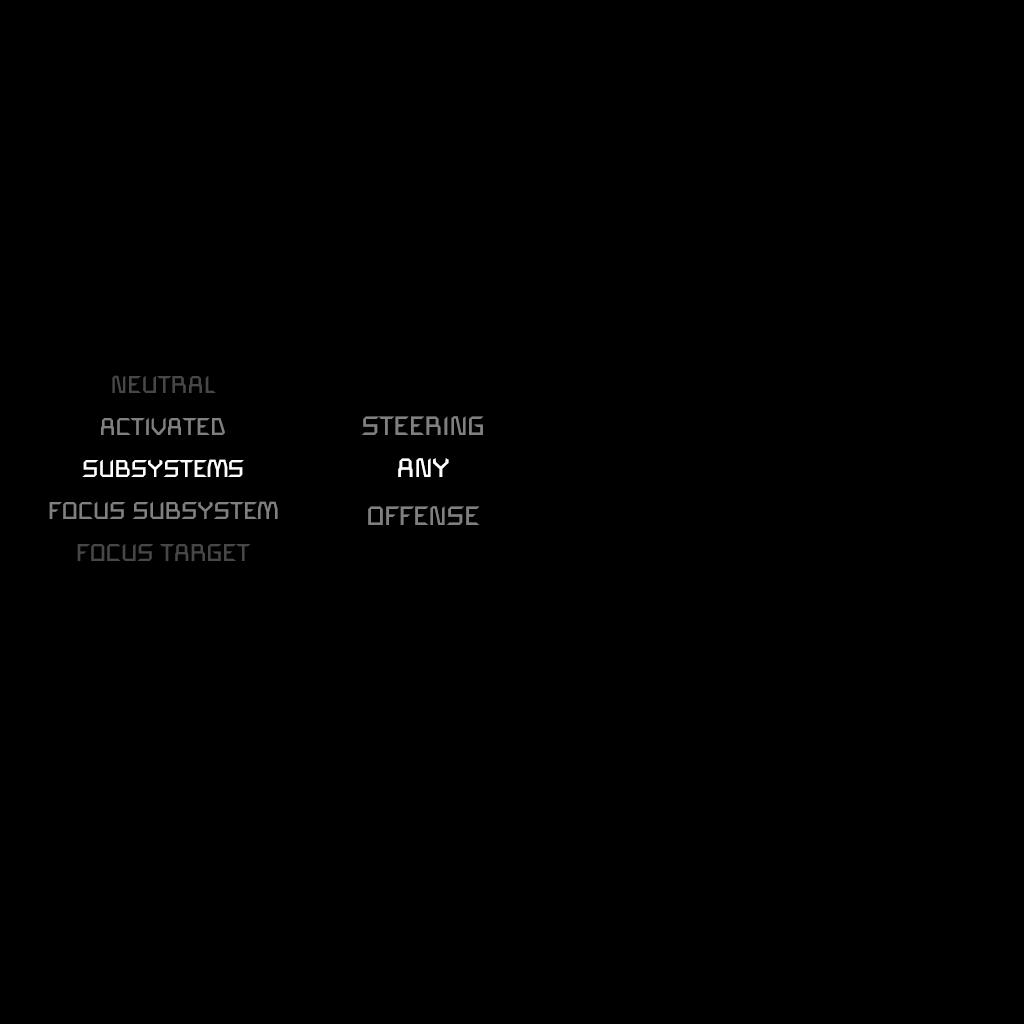
<style>
.page{position:relative;width:1024px;height:1024px;background:#000000}
.page>*{position:absolute;margin:0}
.t1{font:24px "SpaceEngineers";color:#474747}
.t2{font:24px "SpaceEngineers";color:#808080}
.t3{font:26px "SpaceEngineers";color:#808080}
.t4{font:24px "SpaceEngineers";color:#ffffff}
.t5{font:26px "SpaceEngineers";color:#ffffff}
</style>
<div class="page">
<p class="t1" style="left:112px;top:375px;width:104px;height:18px">NEUTRAL</p>
<p class="t2" style="left:101px;top:417px;width:124px;height:18px">ACTIVATED</p>
<p class="t3" style="left:361px;top:416px;width:123px;height:19px">STEERING</p>
<p class="t4" style="left:82px;top:459px;width:162px;height:18px">SUBSYSTEMS</p>
<p class="t5" style="left:398px;top:458px;width:51px;height:19px">ANY</p>
<p class="t2" style="left:49px;top:501px;width:229px;height:18px">FOCUS SUBSYSTEM</p>
<p class="t3" style="left:368px;top:506px;width:112px;height:19px">OFFENSE</p>
<p class="t1" style="left:77px;top:543px;width:174px;height:18px">FOCUS TARGET</p>
</div>
